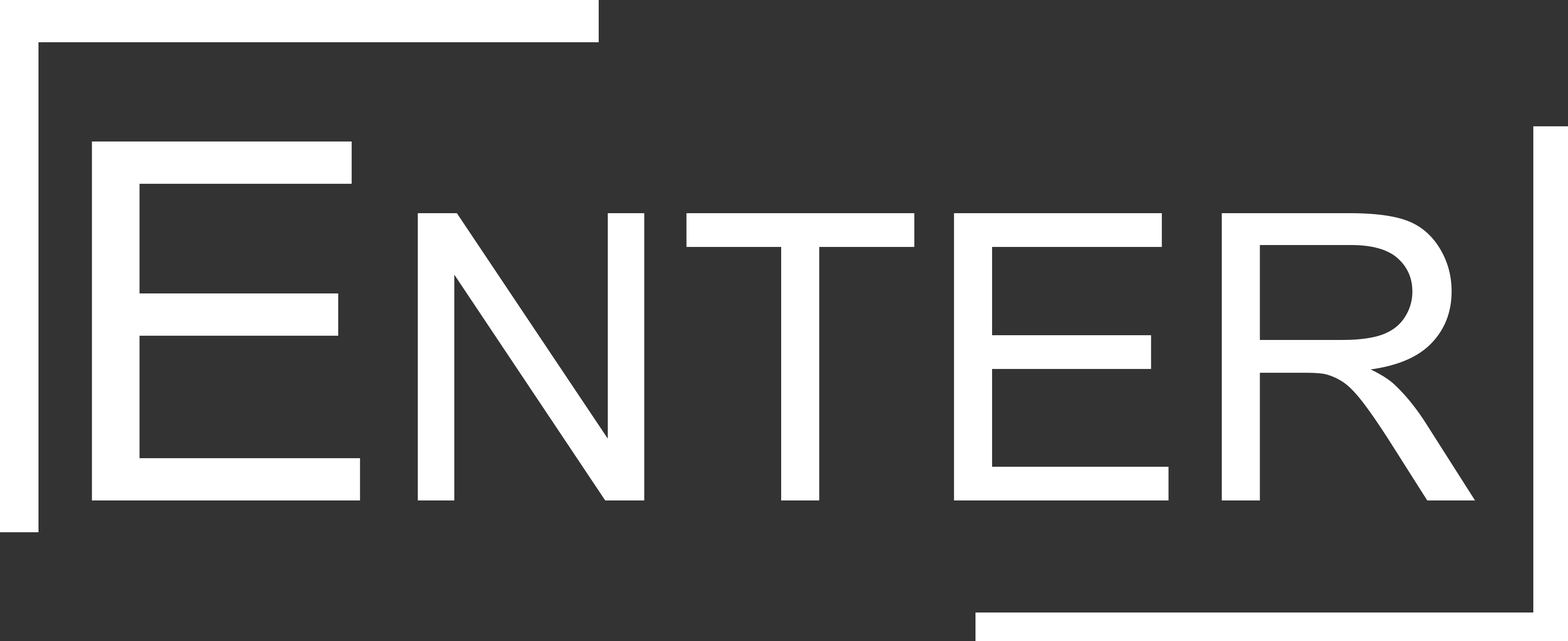
<style>
.page{position:relative;width:1568px;height:641px;background:#333333}
.page>*{position:absolute;margin:0}
.t1{font:401.6px "ArialMT";color:#ffffff}
.t2{font:502px "ArialMT";color:#ffffff}
</style>
<div class="page">
<p class="t1" style="left:92px;top:142px;width:1383px;height:359px"><span class="t2">E</span>NTER</p>
</div>
